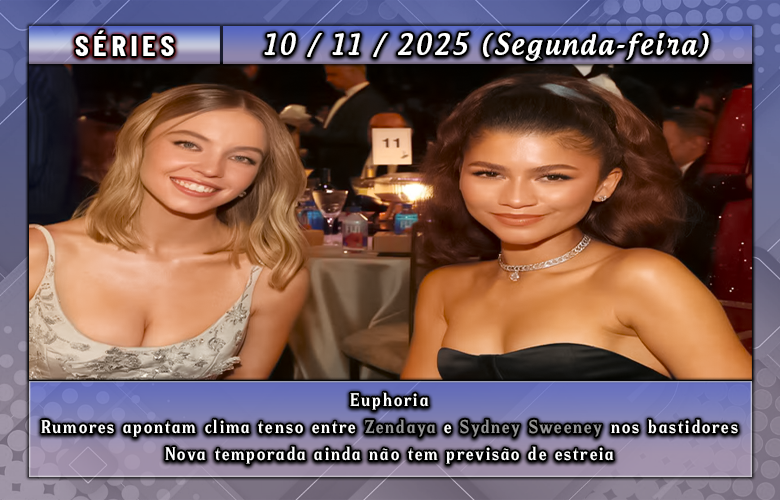
<style>
.page{position:relative;width:780px;height:500px}
.page>*{position:absolute;margin:0}
.t1{font:28.3px "BarlowCondensed-Bold";letter-spacing:0.15em;color:#ffffff;scale:1.09 1}
.t2{font:28.3px "AndrogyneMedium";letter-spacing:0.1em;color:#ffffff;scale:0.92 1}
.t3{font:19.3px/27.1px "Braders";letter-spacing:0.1em;color:#ffffff}
.t4{font:19.3px/27.1px "Braders";letter-spacing:0.1em;color:#959595}
.t5{font:19.3px/27.1px "Braders";letter-spacing:0.1em;color:#949494}
</style>
<div class="page">
<p class="t1" style="left:75px;top:30px;width:99px;height:26px">SÉRIES</p>
<p class="t2" style="left:264px;top:32px;width:445px;height:29px">10 / 11 / 2025 (Segunda-feira)</p>
<p class="t3" style="left:41px;top:392px;width:697px;height:72px;text-align:center">Euphoria<br>Rumores apontam clima tenso entre <span class="t4">Zendaya</span> e <span class="t5">Sydney Sweeney</span> nos bastidores<br>Nova temporada ainda não tem previsão de estreia</p>
</div>
